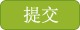
<style>
.page{position:relative;width:80px;height:30px;background:#94b52c}
.page>*{position:absolute;margin:0}
.t1{font:18px "SimSun";color:#fafcfa}
</style>
<div class="page">
<p class="t1" style="left:23px;top:6px;width:36px;height:18px">提交</p>
</div>
